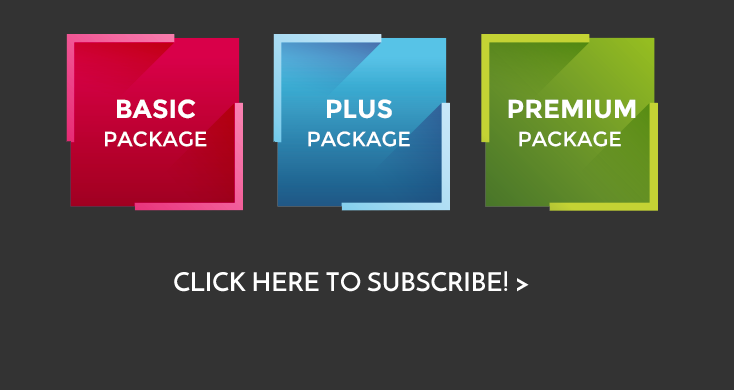
<style>
.page{position:relative;width:734px;height:390px;background:#333333}
.page>*{position:absolute;margin:0}
.t1{font:26px "Montserrat-Bold";color:#ffffff}
.t2{font:20.8px "Montserrat-Regular";color:#ffffff}
.t3{font:26px "JosefinSans-SemiBold";color:#ffffff}
</style>
<div class="page">
<p class="t1" style="left:117px;top:99px;width:79px;height:20px">BASIC</p>
<p class="t1" style="left:327px;top:99px;width:65px;height:20px">PLUS</p>
<p class="t1" style="left:508px;top:99px;width:128px;height:20px">PREMIUM</p>
<p class="t2" style="left:105px;top:131px;width:102px;height:16px">PACKAGE</p>
<p class="t2" style="left:308px;top:131px;width:102px;height:16px">PACKAGE</p>
<p class="t2" style="left:519px;top:131px;width:102px;height:16px">PACKAGE</p>
<p class="t3" style="left:174px;top:271px;width:355px;height:21px">CLICK HERE TO SUBSCRIBE! &gt;</p>
</div>
